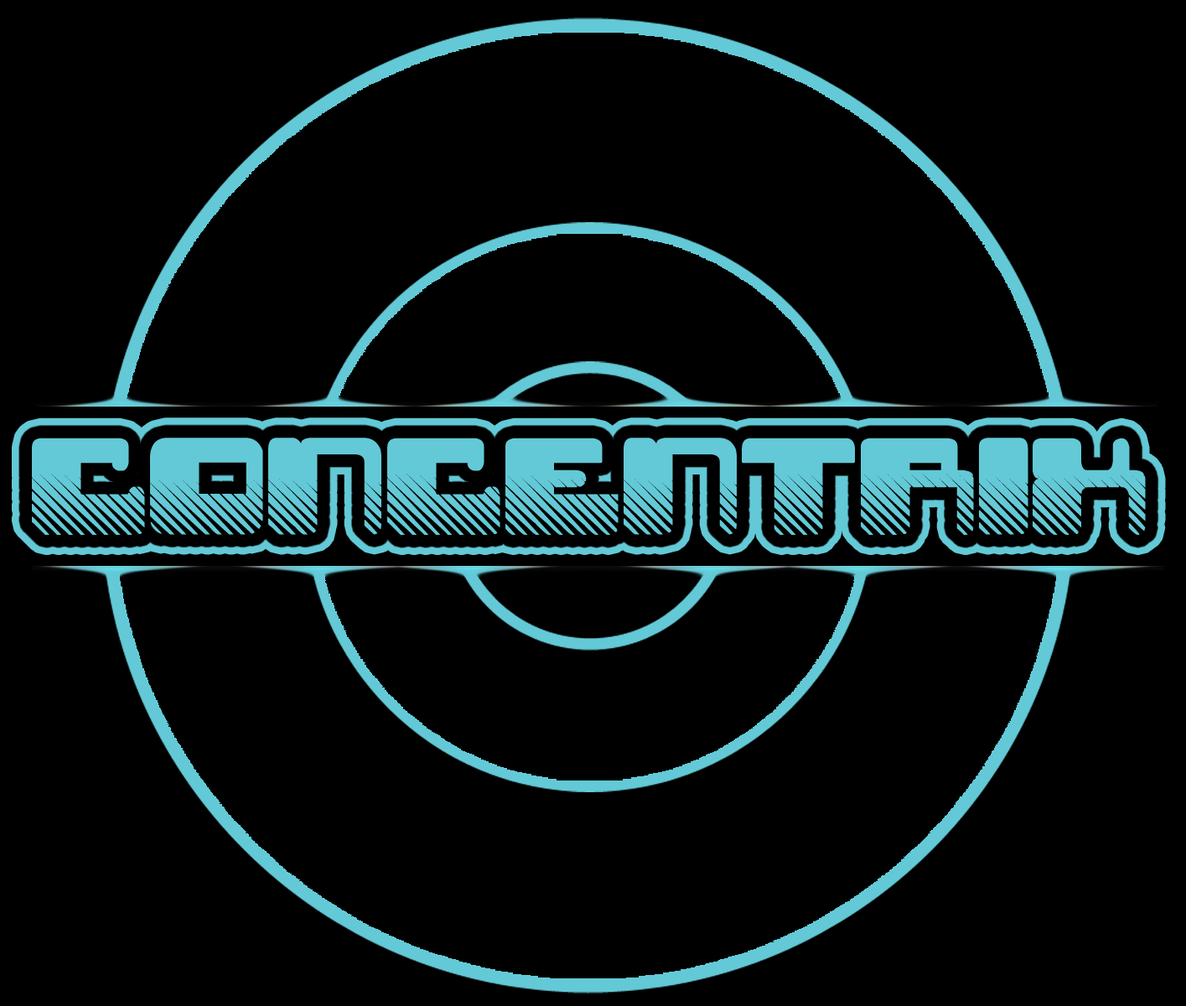
<style>
.page{position:relative;width:1186px;height:1006px;background:#000000}
.page>*{position:absolute;margin:0}
.t1{font:110.2px "StarWaves";color:#63c9d6;font-variant:small-caps}
</style>
<div class="page">
<p class="t1" style="left:32px;top:437px;width:1114px;height:98px">CONCENTRIX</p>
</div>
